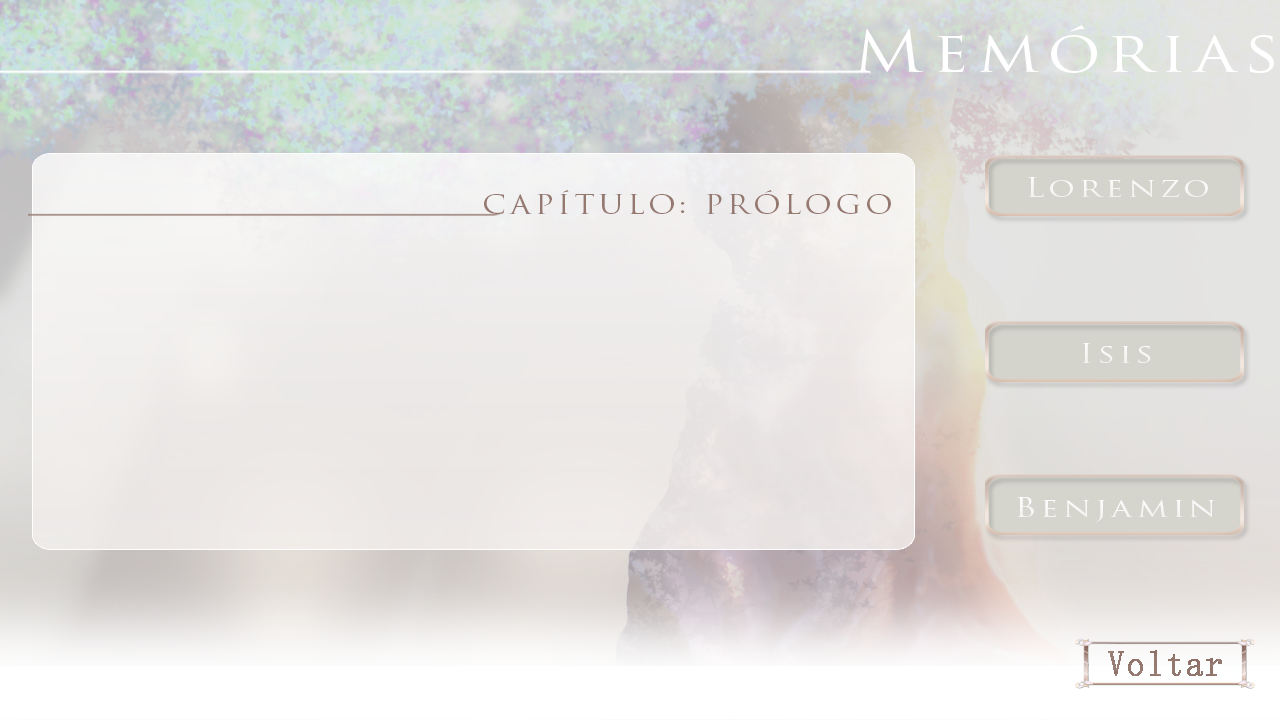
<style>
.page{position:relative;width:1280px;height:720px}
.page>*{position:absolute;margin:0}
.t1{font:56.6px "TrajanPro-Regular";letter-spacing:0.12em;color:#ffffff;scale:1.18 1}
.t2{font:26px "TrajanPro-Regular";letter-spacing:0.12em;color:#ffffff;scale:1.29 1}
.t3{font:25.5px "TrajanPro-Regular";letter-spacing:0.12em;color:#957870;text-transform:uppercase;scale:1.18 1}
</style>
<div class="page">
<p class="t1" style="left:856px;top:25px;width:418px;height:48px">Memórias</p>
<p class="t2" style="left:1028px;top:177px;width:180px;height:20px">Lorenzo</p>
<p class="t3" style="left:484px;top:190px;width:407px;height:24px">Capítulo: PRóloGO</p>
<p class="t2" style="left:1082px;top:343px;width:69px;height:20px">Isis</p>
<p class="t2" style="left:1017px;top:497px;width:198px;height:26px">Benjamin</p>
</div>
